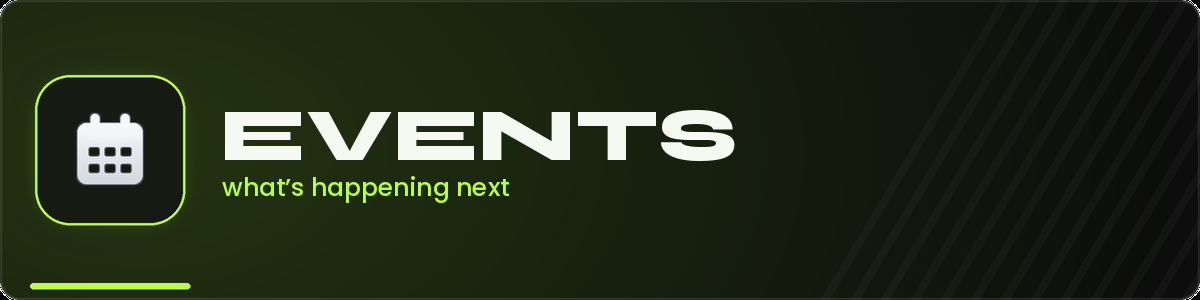
<style>
.page{position:relative;width:1200px;height:300px}
.page>*{position:absolute;margin:0}
.t1{font:75px "Syne-ExtraBold";color:#f6f8f2}
.t2{font:25px "Poppins-Medium";color:#baff40}
</style>
<div class="page">
<p class="t1" style="left:225px;top:110px;width:510px;height:51px">EVENTS</p>
<p class="t2" style="left:222px;top:176px;width:287px;height:27px">what’s happening next</p>
</div>
